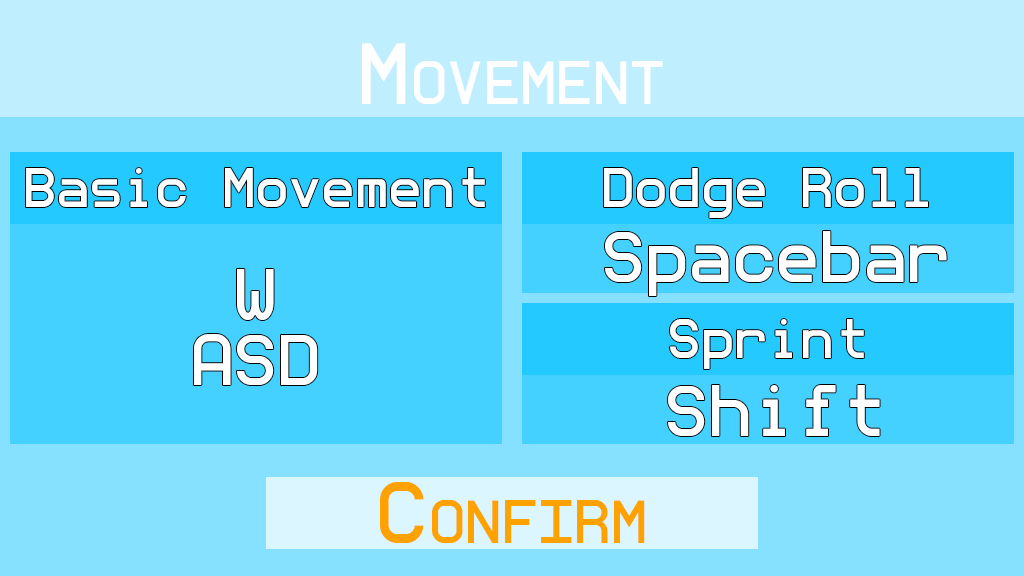
<style>
.page{position:relative;width:1024px;height:576px;background:#85e1ff}
.page>*{position:absolute;margin:0}
.t1{font:77.9px "monoMMM5-Regular";color:#ffffff;font-variant:small-caps}
.t2{font:50px "monoMMM5-Regular";color:#ffffff}
.t3{font:65.4px "monoMMM5-Regular";color:#ffffff}
.t4{font:65.4px/65.3px "monoMMM5-Regular";color:#ffffff}
.t5{font:65.4px/12.4px "monoMMM5-Regular";color:#ffffff}
.t6{font:77.9px "monoMMM5-Regular";color:#ffa200;font-variant:small-caps}
</style>
<div class="page">
<p class="t1" style="left:362px;top:43px;width:301px;height:61px">Movement</p>
<p class="t2" style="left:26px;top:168px;width:459px;height:39px">Basic Movement</p>
<p class="t2" style="left:604px;top:168px;width:324px;height:50px">Dodge Roll</p>
<p class="t3" style="left:605px;top:231px;width:342px;height:65px">Spacebar</p>
<p class="t4" style="left:194px;top:269px;width:124px;height:116px;text-align:center"><span class="t5">W</span><br>ASD</p>
<p class="t2" style="left:670px;top:319px;width:194px;height:50px">Sprint</p>
<p class="t3" style="left:668px;top:385px;width:212px;height:51px">Shift</p>
<p class="t6" style="left:380px;top:482px;width:265px;height:61px">Confirm</p>
</div>
